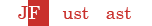
<style>
.page{position:relative;width:152px;height:26px;background:#ffffff}
.page>*{position:absolute;margin:0}
.t1{font:18px "Century";color:#c9302c}
.t2{font:18px "Century";color:#ffffff}
</style>
<div class="page">
<p class="t1" style="left:52px;top:6px;width:79px;height:13px"><span class="t2">J</span>ust <span class="t2">F</span>ast</p>
</div>
